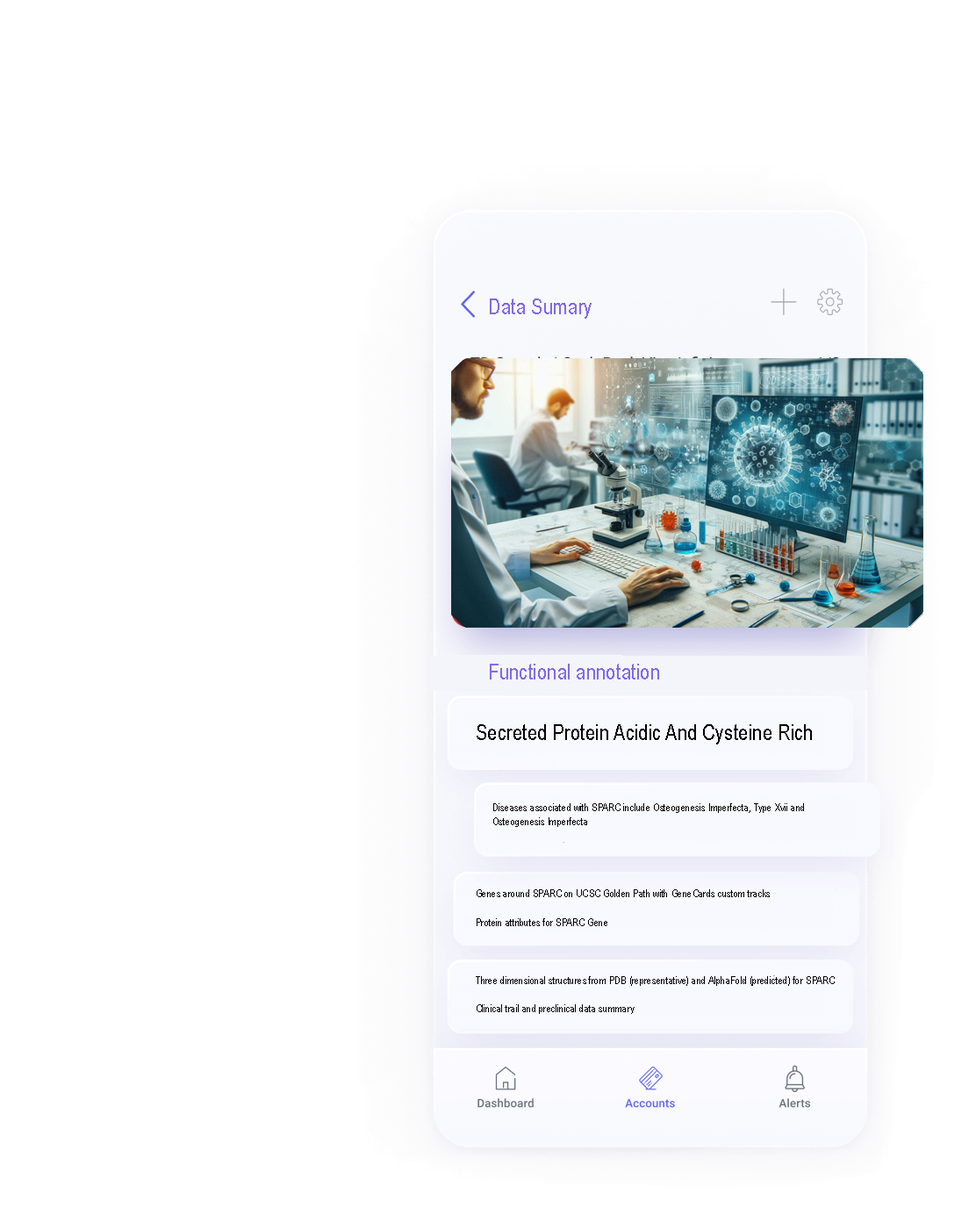
<style>
.page{position:relative;width:976px;height:1222px;background:#ffffff}
.page>*{position:absolute;margin:0}
.t1{font:10.5px "ArialNarrow";color:#010003}
.t2{font:21.9px "ArialNarrow";color:#010003}
</style>
<div class="page">
<p class="t1" style="left:476px;top:724px;width:359px;height:290px"><span class="t2">Secreted Protein Acidic And Cysteine Rich<br><br><br></span>       Diseases associated with SPARC include Osteogenesis Imperfecta, Type Xvii and <br>       Osteogenesis Imperfecta<br><br><br><br><br>Genes around SPARC on UCSC Golden Path with GeneCards custom tracks<br><br>Protein attributes for SPARC Gene<br><br><br><br>Three dimensional structures from PDB (representative) and AlphaFold (predicted) for SPARC<br><br>Clinical trail and preclinical data summary</p>
</div>
